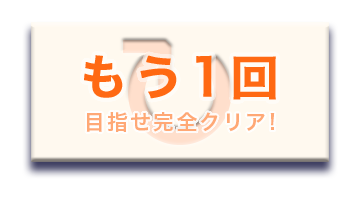
<style>
.page{position:relative;width:360px;height:200px;background:#fff9ef}
.page>*{position:absolute;margin:0}
.t1{font:48px "HiraKakuPro-W6";letter-spacing:0.12em;color:#ff6913;font-weight:bold}
.t2{font:21px "HiraKakuPro-W6";letter-spacing:0.1em;color:#ffa875}
</style>
<div class="page">
<p class="t1" style="left:84px;top:55px;width:192px;height:45px">もう1回</p>
<p class="t2" style="left:86px;top:112px;width:189px;height:20px">目指せ完全クリア!</p>
</div>
